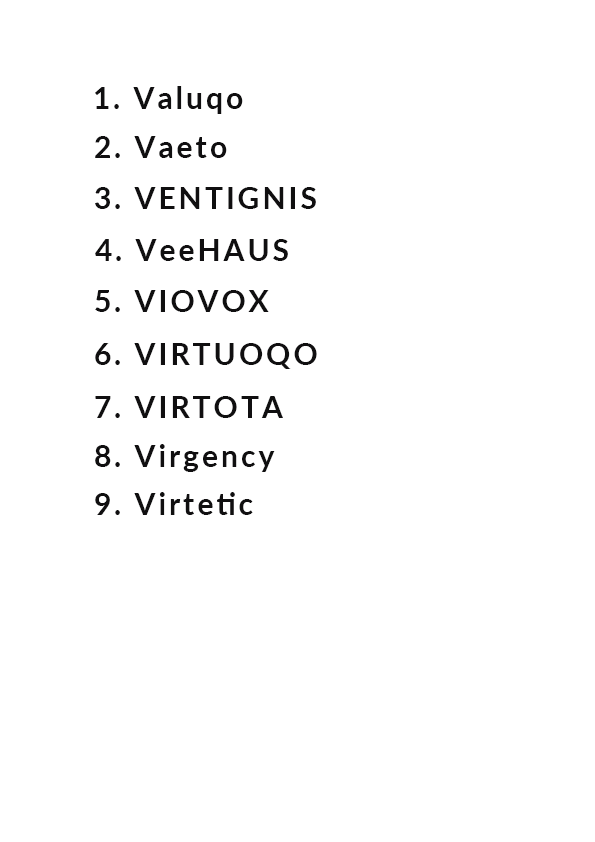
<style>
.page{position:relative;width:595px;height:842px;background:#ffffff}
.page>*{position:absolute;margin:0}
.t1{font:30px "Lato-Bold";letter-spacing:0.1em;color:#100f10}
</style>
<div class="page">
<p class="t1" style="left:95px;top:86px;width:148px;height:28px">1. Valuqo</p>
<p class="t1" style="left:95px;top:136px;width:132px;height:22px">2. Vaeto</p>
<p class="t1" style="left:95px;top:187px;width:221px;height:22px">3. VENTIGNIS</p>
<p class="t1" style="left:95px;top:239px;width:193px;height:22px">4. VeeHAUS</p>
<p class="t1" style="left:95px;top:290px;width:174px;height:22px">5. VIOVOX</p>
<p class="t1" style="left:95px;top:343px;width:222px;height:26px">6. VIRTUOQO</p>
<p class="t1" style="left:95px;top:396px;width:188px;height:22px">7. VIRTOTA</p>
<p class="t1" style="left:95px;top:444px;width:180px;height:28px">8. Virgency</p>
<p class="t1" style="left:95px;top:492px;width:158px;height:23px">9. Virtetic</p>
</div>
